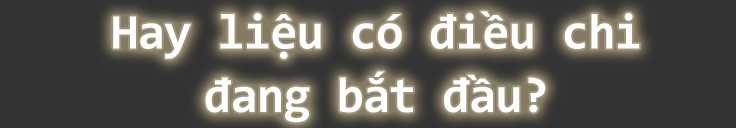
<style>
.page{position:relative;width:736px;height:128px;background:#333333}
.page>*{position:absolute;margin:0}
.t1{font:50px/55.5px "Consolas-Bold";letter-spacing:-0.02em;color:#fefefe}
</style>
<div class="page">
<p class="t1" style="left:113px;top:11px;width:527px;height:112px;text-align:center">Hay liệu có điều chi<br>đang bắt đầu?</p>
</div>
